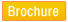
<style>
.page{position:relative;width:68px;height:22px}
.page>*{position:absolute;margin:0}
.t1{font:14px "HelveticaNeueRegular";letter-spacing:0.04em;color:#ffffff}
</style>
<div class="page">
<p class="t1" style="left:8px;top:5px;width:51px;height:12px">Brochure</p>
</div>
